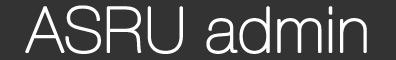
<style>
.page{position:relative;width:396px;height:60px;background:#333333}
.page>*{position:absolute;margin:0}
.t1{font:67px "NimbusSanNovD-UltrLigh";color:#ffffff;font-weight:bold}
</style>
<div class="page">
<p class="t1" style="left:25px;top:5px;width:342px;height:49px">ASRU admin</p>
</div>
